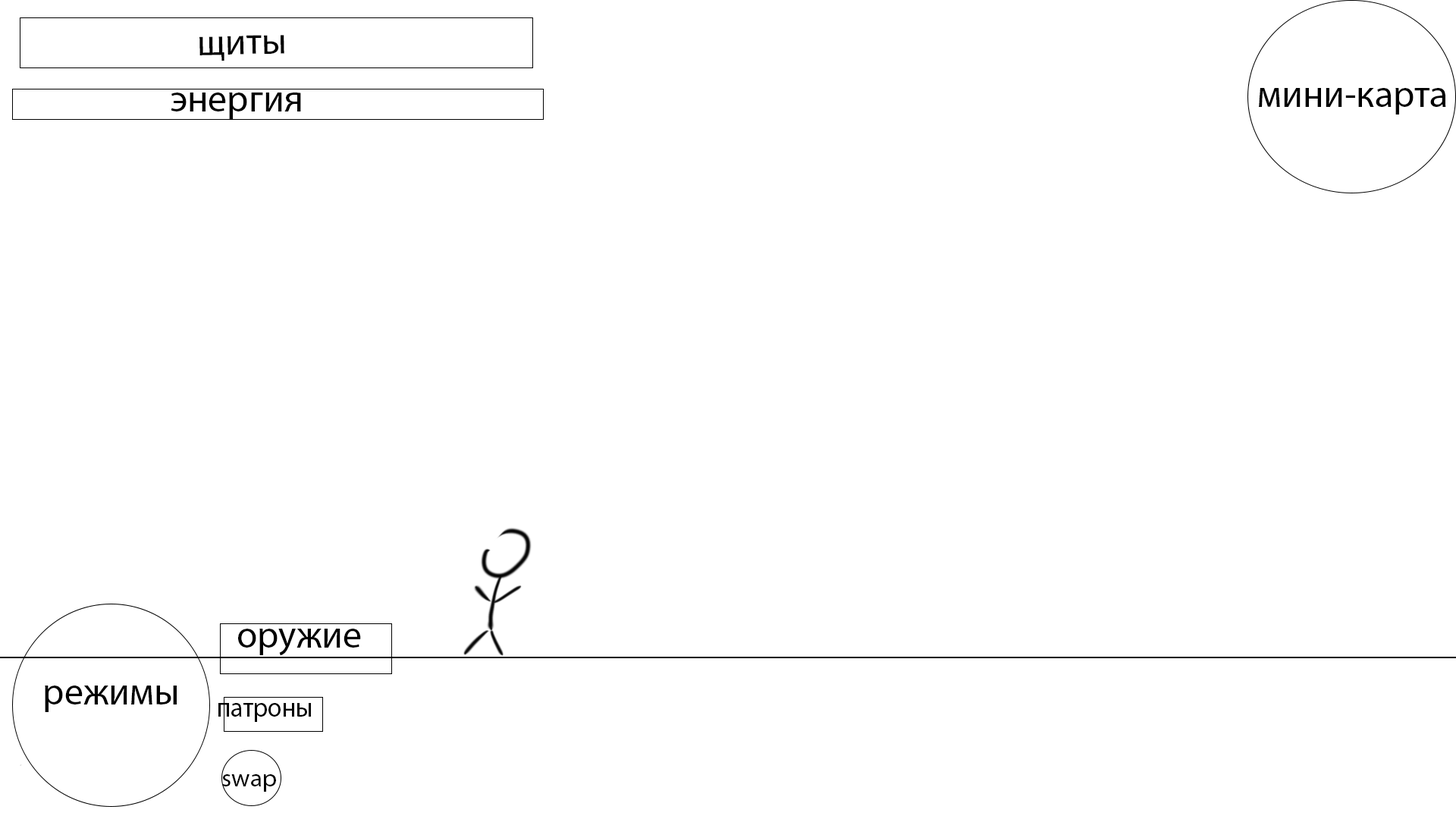
<style>
.page{position:relative;width:1456px;height:819px;background:#ffffff}
.page>*{position:absolute;margin:0}
.t1{font:37.9px "MyriadPro-Regular";color:#000000}
.t2{font:27.1px "MyriadPro-Regular";color:#000000;scale:0.94 1}
.t3{font:25.3px "MyriadPro-Regular";color:#000000}
</style>
<div class="page">
<p class="t1" style="left:199px;top:35px;width:85px;height:26px;rotate:-1deg">щиты</p>
<p class="t1" style="left:1259px;top:88px;width:187px;height:27px">мини-карта</p>
<p class="t1" style="left:171px;top:93px;width:130px;height:26px">энергия</p>
<p class="t1" style="left:238px;top:629px;width:123px;height:27px">оружие</p>
<p class="t1" style="left:45px;top:686px;width:132px;height:26px">режимы</p>
<p class="t2" style="left:218px;top:703px;width:93px;height:19px">патроны</p>
<p class="t3" style="left:222px;top:774px;width:54px;height:18px">swap</p>
</div>
